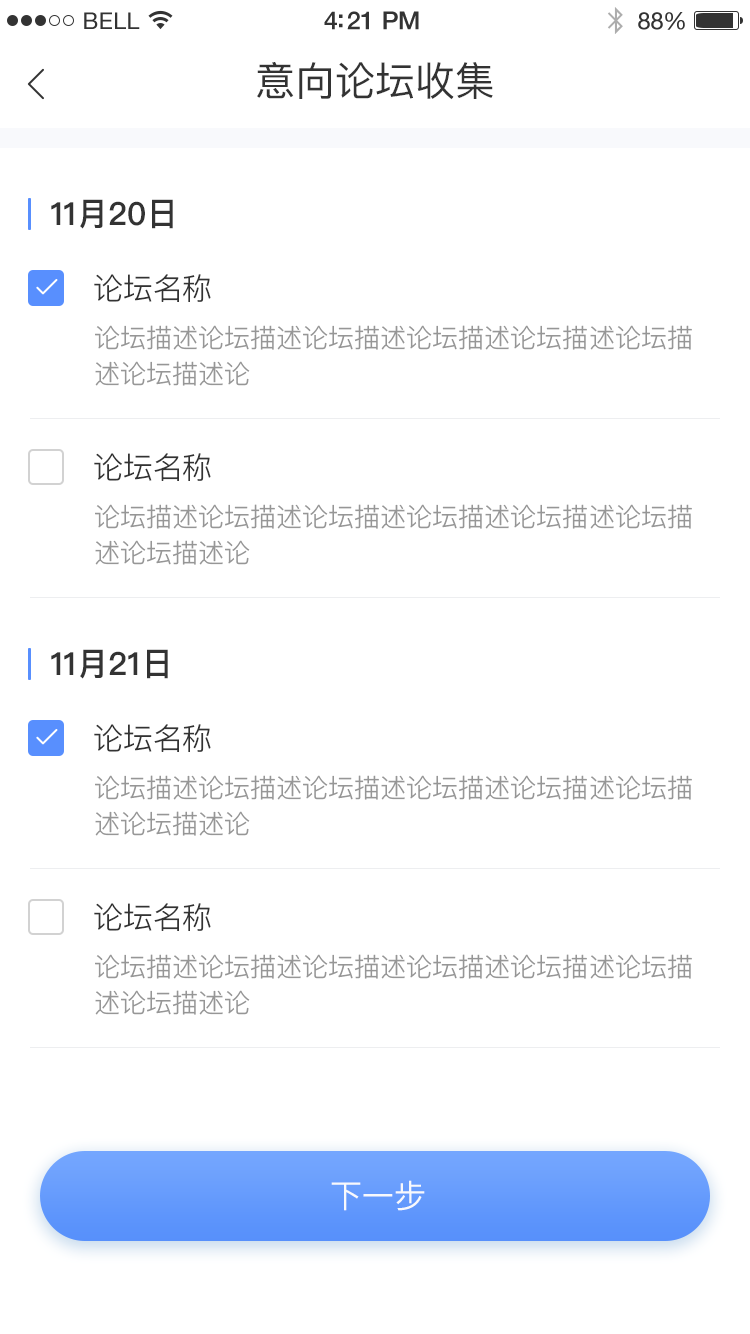
<style>
.page{position:relative;width:750px;height:1334px;background:#ffffff}
.page>*{position:absolute;margin:0}
.t1{font:23px "HelveticaNeue";letter-spacing:0.02em;color:#333333}
.t2{font:25px "HelveticaNeue-Medium";letter-spacing:-0.02em;color:#333333}
.t3{font:24px "HelveticaNeue";letter-spacing:-0.02em;color:#333333}
.t4{font:40px "PingFangSC-Regular";color:#333333}
.t5{font:32px "PingFangSC-Semibold";color:#333333}
.t6{font:30.2px "PingFangSC-Light";color:#333333}
.t7{font:26px/36px "PingFangSC-Light";color:#969696}
.t8{font:32px "PingFangSC-Regular";color:#f8f9fc}
</style>
<div class="page">
<p class="t1" style="left:84px;top:12px;width:56px;height:17px">BELL</p>
<p class="t2" style="left:324px;top:11px;width:95px;height:19px">4:21 PM</p>
<p class="t3" style="left:638px;top:12px;width:47px;height:18px">88%</p>
<p class="t4" style="left:257px;top:62px;width:236px;height:38px">意向论坛收集</p>
<p class="t5" style="left:51px;top:199px;width:122px;height:30px">11月20日</p>
<p class="t6" style="left:94px;top:274px;width:117px;height:28px">论坛名称</p>
<p class="t7" style="left:95px;top:325px;width:597px;height:61px">论坛描述论坛描述论坛描述论坛描述论坛描述论坛描述论坛描述论</p>
<p class="t6" style="left:94px;top:453px;width:117px;height:28px">论坛名称</p>
<p class="t7" style="left:95px;top:504px;width:597px;height:61px">论坛描述论坛描述论坛描述论坛描述论坛描述论坛描述论坛描述论</p>
<p class="t5" style="left:51px;top:649px;width:117px;height:30px">11月21日</p>
<p class="t6" style="left:94px;top:724px;width:117px;height:28px">论坛名称</p>
<p class="t7" style="left:95px;top:775px;width:597px;height:61px">论坛描述论坛描述论坛描述论坛描述论坛描述论坛描述论坛描述论</p>
<p class="t6" style="left:94px;top:903px;width:117px;height:28px">论坛名称</p>
<p class="t7" style="left:95px;top:954px;width:597px;height:61px">论坛描述论坛描述论坛描述论坛描述论坛描述论坛描述论坛描述论</p>
<p class="t8" style="left:331px;top:1180px;width:94px;height:31px">下一步</p>
</div>
